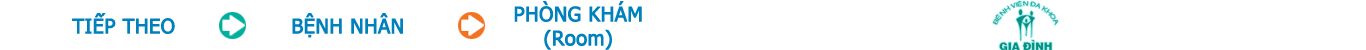
<style>
.page{position:relative;width:1366px;height:50px;background:#ffffff}
.page>*{position:absolute;margin:0}
.t1{font:20px "Tahoma";color:#0081bd;font-weight:bold}
</style>
<div class="page">
<p class="t1" style="left:514px;top:1px;width:128px;height:49px;text-align:center">PHÒNG KHÁM<br>(Room)</p>
<p class="t1" style="left:72px;top:13px;width:103px;height:21px">TIẾP THEO</p>
<p class="t1" style="left:292px;top:13px;width:111px;height:25px">BỆNH NHÂN</p>
</div>
